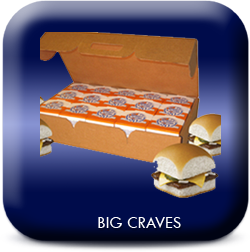
<style>
.page{position:relative;width:250px;height:252px}
.page>*{position:absolute;margin:0}
.t1{font:16.7px "TwCenMT-Regular";letter-spacing:0.01em;color:#ffffff;font-variant:small-caps}
</style>
<div class="page">
<p class="t1" style="left:98px;top:217px;width:83px;height:11px">BIG CRAVES</p>
</div>
